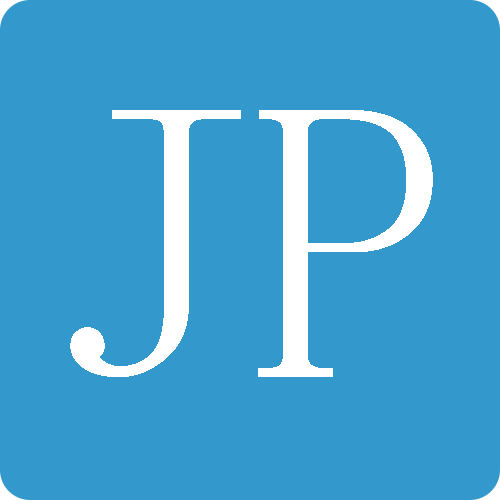
<style>
.page{position:relative;width:500px;height:500px;background:#3399cc}
.page>*{position:absolute;margin:0}
.t1{font:400px "SimSun-ExtB";color:#ffffff}
</style>
<div class="page">
<p class="t1" style="left:70px;top:110px;width:363px;height:267px">JP</p>
</div>
